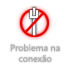
<style>
.page{position:relative;width:70px;height:70px;background:#ffffff}
.page>*{position:absolute;margin:0}
.t1{font:9px "SegoeUI";color:#b0b0b0}
</style>
<div class="page">
<p class="t1" style="left:10px;top:44px;width:50px;height:18px;text-align:center">Problema na<br>conexão</p>
</div>
